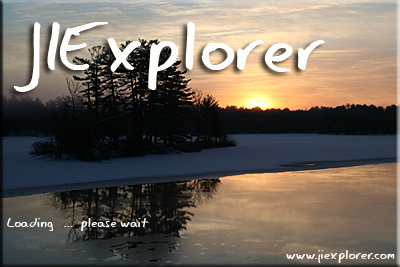
<style>
.page{position:relative;width:400px;height:267px}
.page>*{position:absolute;margin:0}
.t1{font:72px "EagerNaturalist";color:#fdfdfb}
.t2{font:14px "EagerNaturalist";color:#fdfdfb}
</style>
<div class="page">
<p class="t1" style="left:14px;top:22px;width:312px;height:70px">JIExplorer</p>
<p class="t2" style="left:7px;top:218px;width:142px;height:13px">Loading   ...  please wait</p>
<p class="t2" style="left:286px;top:250px;width:109px;height:13px">www.jiexplorer.com</p>
</div>
